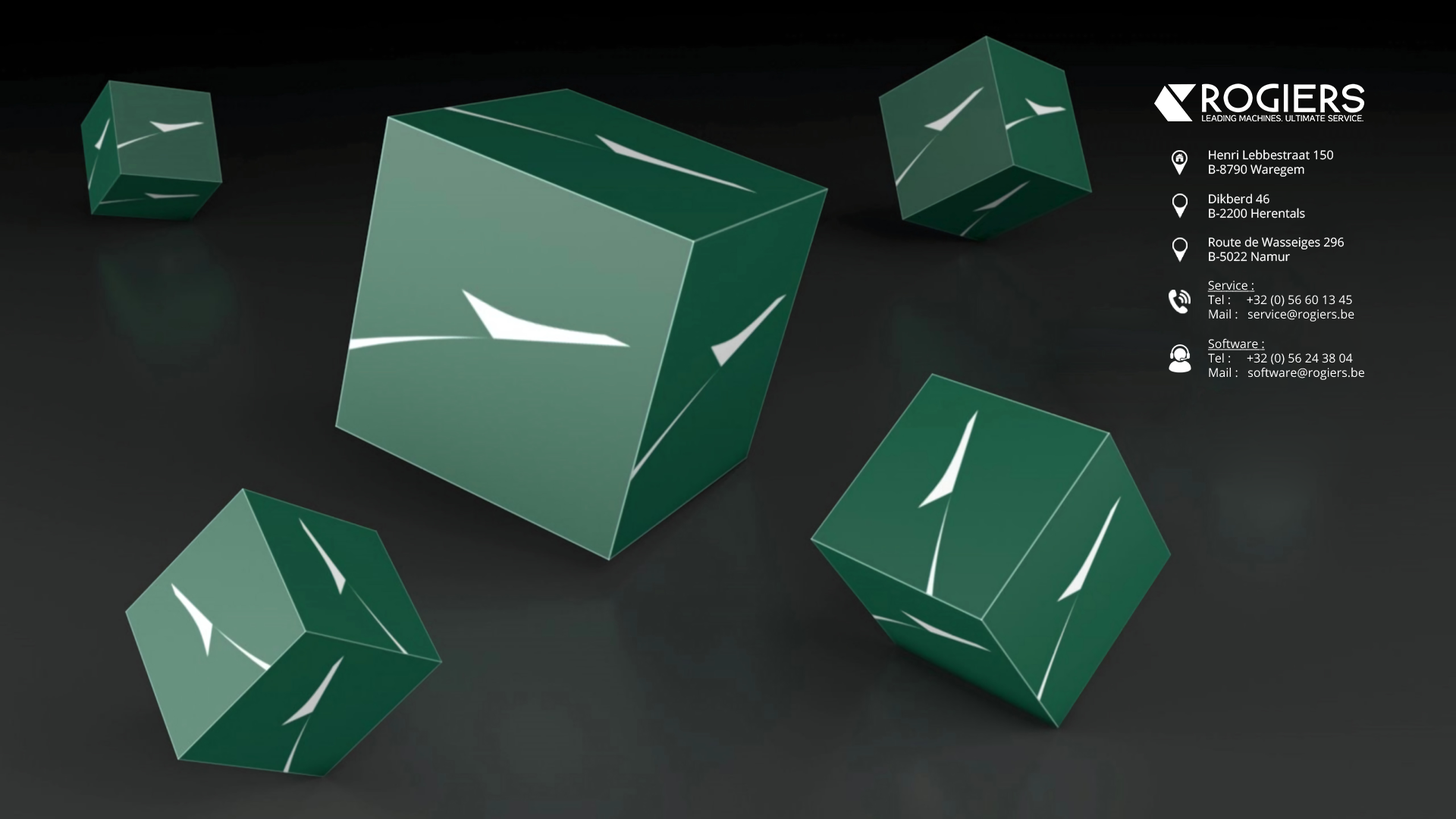
<style>
.page{position:relative;width:1456px;height:819px}
.page>*{position:absolute;margin:0}
.t1{font:12.1px "OpenSans";color:#ffffff}
.t2{font:12.1px "OpenSans";color:#ffffff;text-decoration:underline}
</style>
<div class="page">
<p class="t1" style="left:1209px;top:149px;width:124px;height:28px">Henri Lebbestraat 150<br>B-8790 Waregem</p>
<p class="t1" style="left:1209px;top:193px;width:96px;height:25px">Dikberd 46<br>B-2200 Herentals</p>
<p class="t1" style="left:1209px;top:237px;width:135px;height:25px">Route de Wasseiges 296<br>B-5022 Namur</p>
<p class="t1" style="left:1207px;top:281px;width:147px;height:41px"><span class="t2">Service :<br></span>Tel :     +32 (0) 56 60 13 45<br>Mail :   service@rogiers.be</p>
<p class="t1" style="left:1208px;top:338px;width:156px;height:42px"><span class="t2">Software :<br></span>Tel :     +32 (0) 56 24 38 04<br>Mail :   software@rogiers.be</p>
</div>
